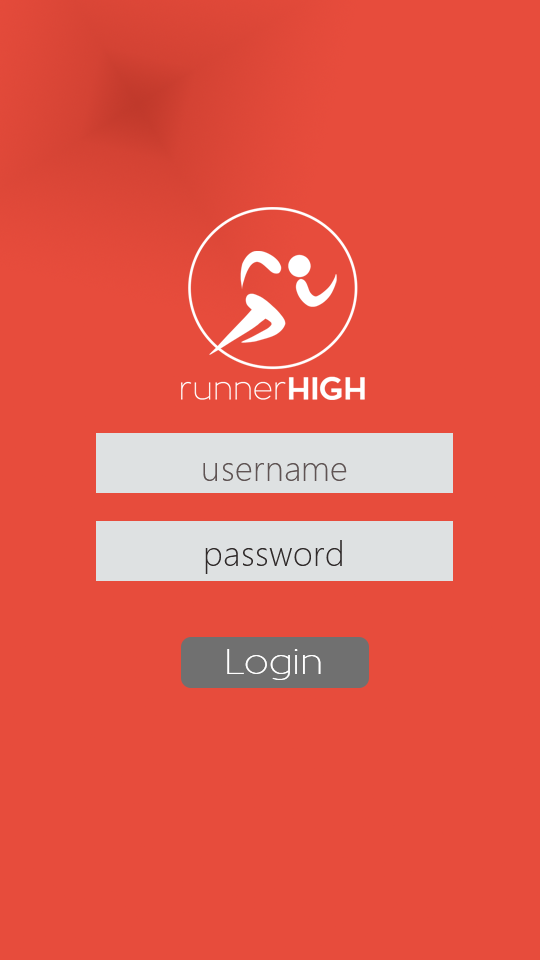
<style>
.page{position:relative;width:540px;height:960px;background:#e74c3c}
.page>*{position:absolute;margin:0}
.t1{font:35.3px "SegoeUI-Light";color:#605454}
.t2{font:35.3px "SegoeUI-Light";color:#302a2a}
.t3{font:35.3px "ZonaPro-Thin";color:#ffffff}
</style>
<div class="page">
<p class="t1" style="left:203px;top:463px;width:144px;height:18px">username</p>
<p class="t2" style="left:205px;top:540px;width:137px;height:34px">password</p>
<p class="t3" style="left:227px;top:649px;width:94px;height:31px">Login</p>
</div>
